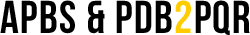
<style>
.page{position:relative;width:250px;height:35px;background:#ffffff}
.page>*{position:absolute;margin:0}
.t1{font:46px "BebasNeue";letter-spacing:0.03em;color:#000000}
.t2{font:46px "BebasNeue";letter-spacing:0.03em;color:#ffcc00}
</style>
<div class="page">
<p class="t1" style="left:0px;top:0px;width:250px;height:35px">APBS &amp; PDB<span class="t2">2</span>PQR</p>
</div>
